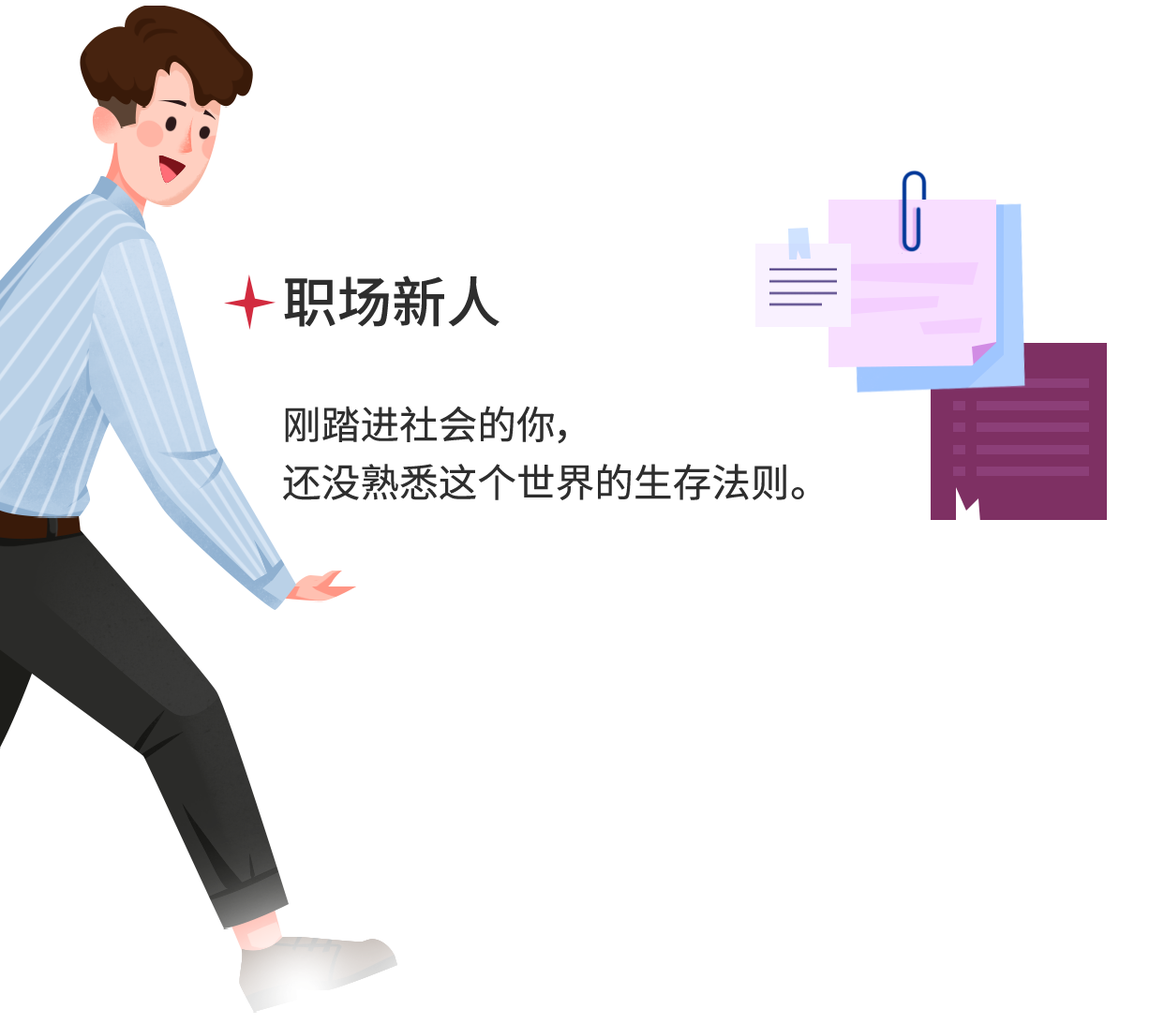
<style>
.page{position:relative;width:1164px;height:1024px;background:#ffffff}
.page>*{position:absolute;margin:0}
.t1{font:54.7px "SourceHanSansCN-Medium";color:#2e2e2e}
.t2{font:39.1px/57.8px "SourceHanSansCN-Regular";color:#2e2e2e}
</style>
<div class="page">
<p class="t1" style="left:284px;top:276px;width:216px;height:51px">职场新人</p>
<p class="t2" style="left:283px;top:406px;width:521px;height:94px">刚踏进社会的你，<br>还没熟悉这个世界的生存法则。</p>
</div>
